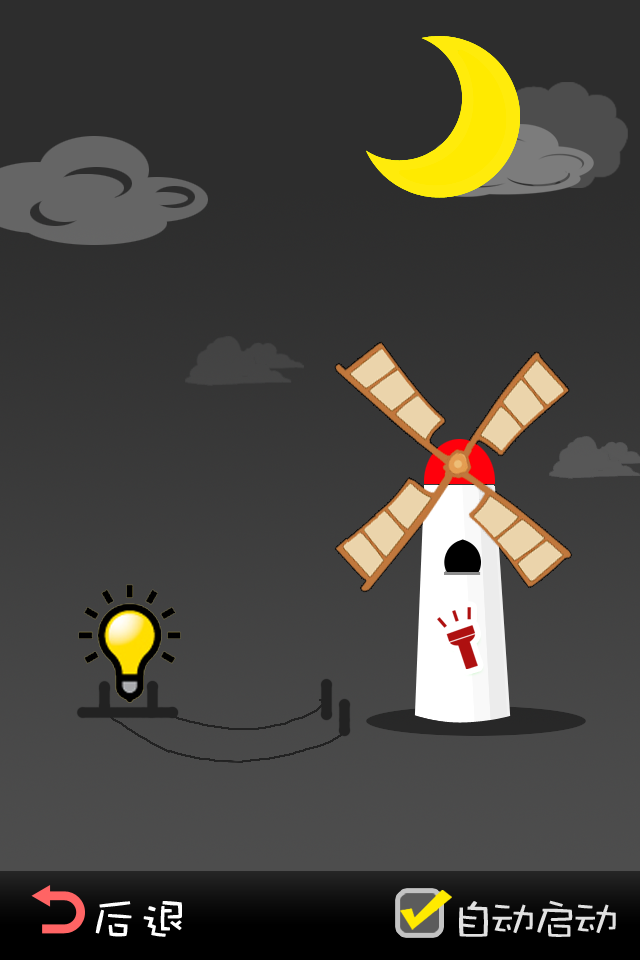
<style>
.page{position:relative;width:640px;height:960px}
.page>*{position:absolute;margin:0}
.t1{font:50px "DFPWaWaW5";color:#ffffff}
.t2{font:45px "DFPWaWaW5";color:#e1e1e1;scale:1.11 1}
</style>
<div class="page">
<p class="t1" style="left:95px;top:901px;width:87px;height:36px">后退</p>
<p class="t2" style="left:459px;top:900px;width:157px;height:37px">自动启动</p>
</div>
